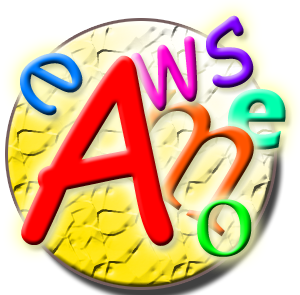
<style>
.page{position:relative;width:300px;height:295px}
.page>*{position:absolute;margin:0}
.t1{font:115.6px "ComicSansMS";scale:0.92 1}
.t2{font:115.6px "ComicSansMS"}
.t3{font:258px "ComicSansMS";color:#ff0000}
.t4{font:115.6px "ErasITC-Bold";scale:0.92 1}
.t5{font:115.6px "CalistoMT"}
</style>
<div class="page">
<p class="t1" style="left:131px;top:15px;width:123px;height:96px;rotate:-18deg">ws</p>
<p class="t2" style="left:20px;top:53px;width:63px;height:63px;rotate:54deg">e</p>
<p class="t3" style="left:21px;top:55px;width:153px;height:191px">A</p>
<p class="t4" style="left:227px;top:89px;width:59px;height:61px">e</p>
<p class="t5" style="left:197px;top:199px;width:55px;height:58px">o</p>
</div>
